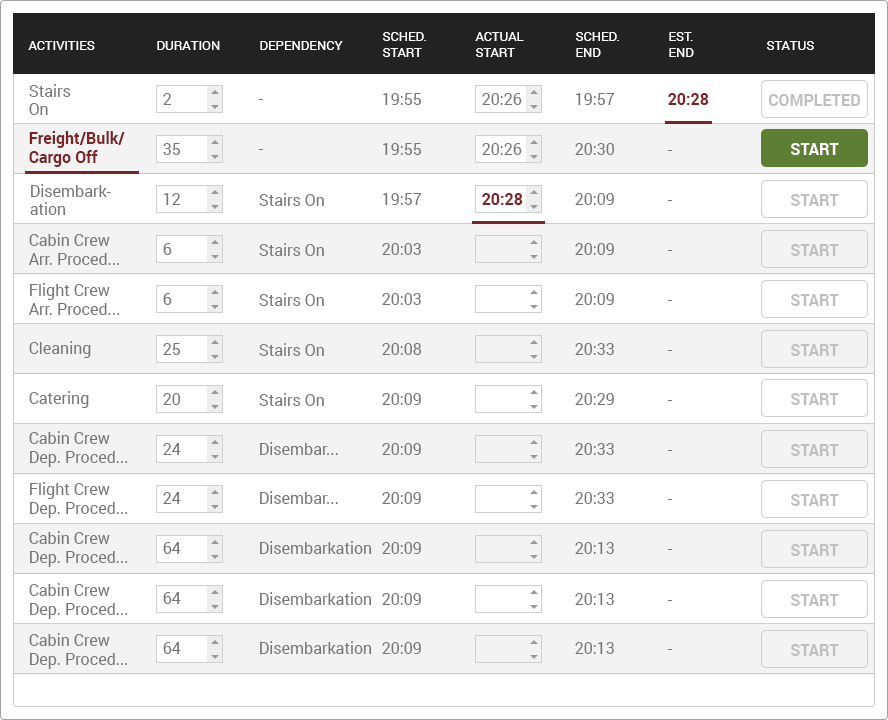
<style>
.page{position:relative;width:888px;height:720px;background:#ffffff}
.page>*{position:absolute;margin:0}
.t1{font:13px "Roboto-Regular";color:#ffffff;text-transform:uppercase}
.t2{font:16px/18px "Roboto-Regular";color:#767676}
.t3{font:16px "Roboto-Regular";color:#767676}
.t4{font:16px "Roboto-Bold";color:#7b2326}
.t5{font:16px "Roboto-Bold";color:#bfbfbf;text-transform:uppercase}
.t6{font:16px "Roboto-Bold";color:#ffffff;text-transform:uppercase}
</style>
<div class="page">
<p class="t1" style="left:28px;top:41px;width:67px;height:9px">Activities</p>
<p class="t1" style="left:157px;top:41px;width:63px;height:9px">Duration</p>
<p class="t1" style="left:260px;top:41px;width:83px;height:9px">Dependency</p>
<p class="t1" style="left:383px;top:32px;width:43px;height:25px">Sched.<br>Start</p>
<p class="t1" style="left:475px;top:32px;width:49px;height:25px">Actual<br>Start</p>
<p class="t1" style="left:576px;top:32px;width:43px;height:25px">Sched.<br>End</p>
<p class="t1" style="left:669px;top:32px;width:25px;height:25px">Est.<br>End</p>
<p class="t1" style="left:767px;top:41px;width:47px;height:9px">Status</p>
<p class="t2" style="left:29px;top:84px;width:42px;height:31px">Stairs<br>On</p>
<p class="t3" style="left:163px;top:93px;width:9px;height:12px">2</p>
<p class="t3" style="left:258px;top:99px;width:5px;height:1px">-</p>
<p class="t3" style="left:383px;top:93px;width:38px;height:12px">19:55</p>
<p class="t3" style="left:482px;top:93px;width:40px;height:12px">20:26</p>
<p class="t3" style="left:576px;top:93px;width:39px;height:12px">19:57</p>
<p class="t4" style="left:668px;top:93px;width:41px;height:12px">20:28</p>
<p class="t5" style="left:769px;top:94px;width:91px;height:12px">Completed</p>
<p class="t4" style="left:29px;top:131px;width:96px;height:36px">Freight/Bulk/<br>Cargo Off</p>
<p class="t3" style="left:163px;top:143px;width:17px;height:12px">35</p>
<p class="t3" style="left:258px;top:149px;width:5px;height:1px">-</p>
<p class="t3" style="left:383px;top:143px;width:38px;height:12px">19:55</p>
<p class="t3" style="left:482px;top:143px;width:40px;height:12px">20:26</p>
<p class="t3" style="left:575px;top:143px;width:39px;height:12px">20:30</p>
<p class="t3" style="left:667px;top:150px;width:5px;height:1px">-</p>
<p class="t6" style="left:791px;top:143px;width:48px;height:12px">Start</p>
<p class="t2" style="left:30px;top:184px;width:81px;height:31px">Disembark-<br>ation</p>
<p class="t3" style="left:164px;top:193px;width:17px;height:12px">12</p>
<p class="t3" style="left:259px;top:193px;width:65px;height:13px">Stairs On</p>
<p class="t3" style="left:383px;top:193px;width:39px;height:12px">19:57</p>
<p class="t4" style="left:482px;top:193px;width:41px;height:12px">20:28</p>
<p class="t3" style="left:575px;top:193px;width:39px;height:12px">20:09</p>
<p class="t5" style="left:791px;top:194px;width:48px;height:12px">Start</p>
<p class="t3" style="left:667px;top:200px;width:5px;height:1px">-</p>
<p class="t3" style="left:28px;top:233px;width:92px;height:32px">Cabin Crew<br>Arr. Proced...</p>
<p class="t3" style="left:163px;top:243px;width:9px;height:12px">6</p>
<p class="t3" style="left:259px;top:243px;width:65px;height:13px">Stairs On</p>
<p class="t3" style="left:382px;top:243px;width:39px;height:12px">20:03</p>
<p class="t3" style="left:575px;top:243px;width:39px;height:12px">20:09</p>
<p class="t5" style="left:791px;top:244px;width:48px;height:12px">Start</p>
<p class="t3" style="left:667px;top:250px;width:5px;height:1px">-</p>
<p class="t3" style="left:28px;top:283px;width:92px;height:32px">Flight Crew<br>Arr. Proced...</p>
<p class="t3" style="left:163px;top:293px;width:9px;height:12px">6</p>
<p class="t3" style="left:259px;top:293px;width:65px;height:13px">Stairs On</p>
<p class="t3" style="left:382px;top:293px;width:39px;height:12px">20:03</p>
<p class="t3" style="left:575px;top:293px;width:39px;height:12px">20:09</p>
<p class="t5" style="left:791px;top:294px;width:48px;height:12px">Start</p>
<p class="t3" style="left:667px;top:300px;width:5px;height:1px">-</p>
<p class="t3" style="left:29px;top:341px;width:62px;height:17px">Cleaning</p>
<p class="t3" style="left:163px;top:343px;width:17px;height:12px">25</p>
<p class="t3" style="left:259px;top:343px;width:65px;height:13px">Stairs On</p>
<p class="t3" style="left:382px;top:343px;width:40px;height:12px">20:08</p>
<p class="t3" style="left:575px;top:343px;width:39px;height:12px">20:33</p>
<p class="t3" style="left:667px;top:350px;width:5px;height:1px">-</p>
<p class="t5" style="left:791px;top:344px;width:48px;height:12px">Start</p>
<p class="t3" style="left:29px;top:391px;width:60px;height:17px">Catering</p>
<p class="t3" style="left:163px;top:393px;width:17px;height:12px">20</p>
<p class="t3" style="left:259px;top:393px;width:65px;height:13px">Stairs On</p>
<p class="t3" style="left:382px;top:393px;width:39px;height:12px">20:09</p>
<p class="t3" style="left:575px;top:393px;width:39px;height:12px">20:29</p>
<p class="t3" style="left:667px;top:400px;width:5px;height:1px">-</p>
<p class="t5" style="left:791px;top:393px;width:48px;height:12px">Start</p>
<p class="t3" style="left:29px;top:431px;width:99px;height:36px">Cabin Crew<br>Dep. Proced...</p>
<p class="t3" style="left:163px;top:443px;width:18px;height:12px">24</p>
<p class="t3" style="left:260px;top:442px;width:78px;height:13px">Disembar...</p>
<p class="t3" style="left:382px;top:443px;width:39px;height:12px">20:09</p>
<p class="t3" style="left:575px;top:443px;width:39px;height:12px">20:33</p>
<p class="t5" style="left:791px;top:444px;width:48px;height:12px">Start</p>
<p class="t3" style="left:667px;top:450px;width:5px;height:1px">-</p>
<p class="t3" style="left:30px;top:482px;width:98px;height:36px">Flight Crew<br>Dep. Proced...</p>
<p class="t3" style="left:163px;top:492px;width:18px;height:12px">24</p>
<p class="t3" style="left:260px;top:491px;width:78px;height:13px">Disembar...</p>
<p class="t3" style="left:382px;top:492px;width:39px;height:12px">20:09</p>
<p class="t3" style="left:575px;top:492px;width:39px;height:12px">20:33</p>
<p class="t5" style="left:791px;top:494px;width:48px;height:12px">Start</p>
<p class="t3" style="left:667px;top:499px;width:5px;height:1px">-</p>
<p class="t3" style="left:29px;top:531px;width:99px;height:36px">Cabin Crew<br>Dep. Proced...</p>
<p class="t3" style="left:163px;top:542px;width:18px;height:12px">64</p>
<p class="t3" style="left:260px;top:541px;width:112px;height:13px">Disembarkation</p>
<p class="t3" style="left:382px;top:542px;width:39px;height:12px">20:09</p>
<p class="t3" style="left:575px;top:542px;width:39px;height:12px">20:13</p>
<p class="t5" style="left:791px;top:544px;width:48px;height:12px">Start</p>
<p class="t3" style="left:667px;top:549px;width:5px;height:1px">-</p>
<p class="t3" style="left:29px;top:583px;width:99px;height:36px">Cabin Crew<br>Dep. Proced...</p>
<p class="t3" style="left:163px;top:592px;width:18px;height:12px">64</p>
<p class="t3" style="left:260px;top:592px;width:112px;height:13px">Disembarkation</p>
<p class="t3" style="left:382px;top:593px;width:39px;height:12px">20:09</p>
<p class="t3" style="left:575px;top:593px;width:39px;height:12px">20:13</p>
<p class="t3" style="left:667px;top:600px;width:5px;height:1px">-</p>
<p class="t5" style="left:791px;top:594px;width:48px;height:12px">Start</p>
<p class="t3" style="left:29px;top:633px;width:99px;height:36px">Cabin Crew<br>Dep. Proced...</p>
<p class="t3" style="left:260px;top:641px;width:112px;height:13px">Disembarkation</p>
<p class="t3" style="left:163px;top:642px;width:18px;height:12px">64</p>
<p class="t3" style="left:382px;top:642px;width:39px;height:12px">20:09</p>
<p class="t3" style="left:575px;top:642px;width:39px;height:12px">20:13</p>
<p class="t3" style="left:667px;top:649px;width:5px;height:1px">-</p>
<p class="t5" style="left:791px;top:644px;width:48px;height:12px">Start</p>
</div>
